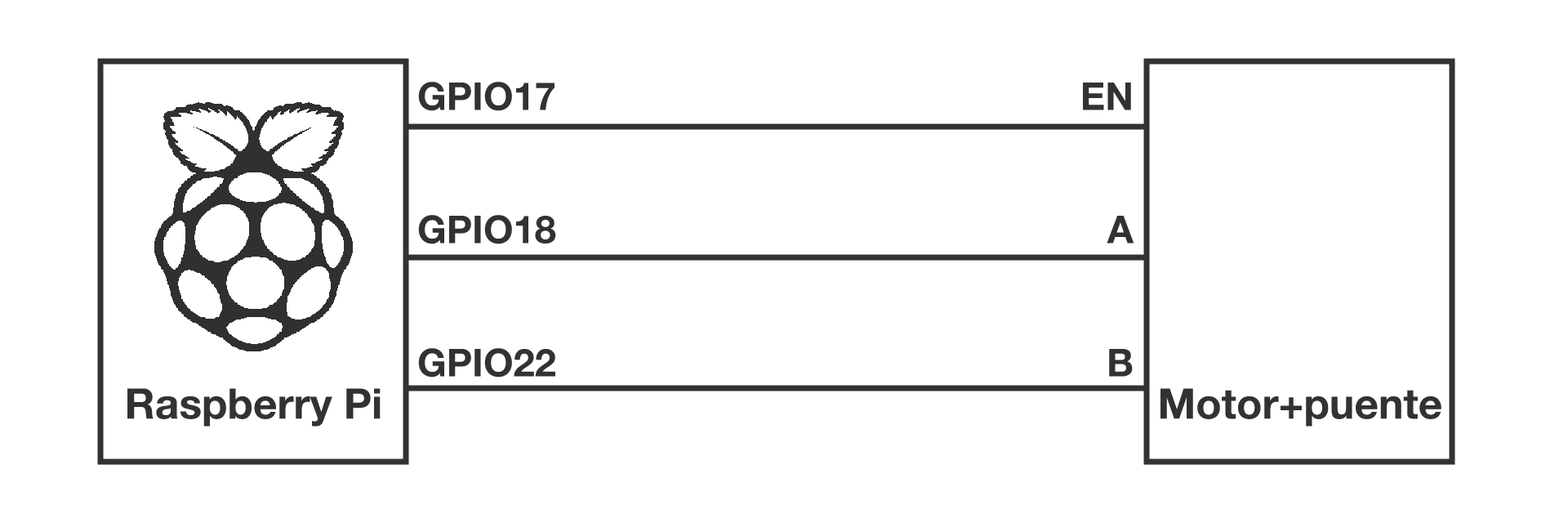
<style>
.page{position:relative;width:1568px;height:523px;background:#ffffff}
.page>*{position:absolute;margin:0}
.t1{font:38.4px/125px "HelveticaNeue-Bold";color:#323232}
.t2{font:42.1px "HelveticaNeue-Bold";color:#323232}
</style>
<div class="page">
<p class="t1" style="left:418px;top:82px;width:138px;height:295px">GPIO17<br>GPIO18<br>GPIO22</p>
<p class="t1" style="left:1083px;top:82px;width:51px;height:294px;text-align:right">EN<br>A<br>B</p>
<p class="t2" style="left:127px;top:388px;width:254px;height:38px">Raspberry Pi</p>
<p class="t2" style="left:1160px;top:388px;width:281px;height:38px">Motor+puente</p>
</div>
